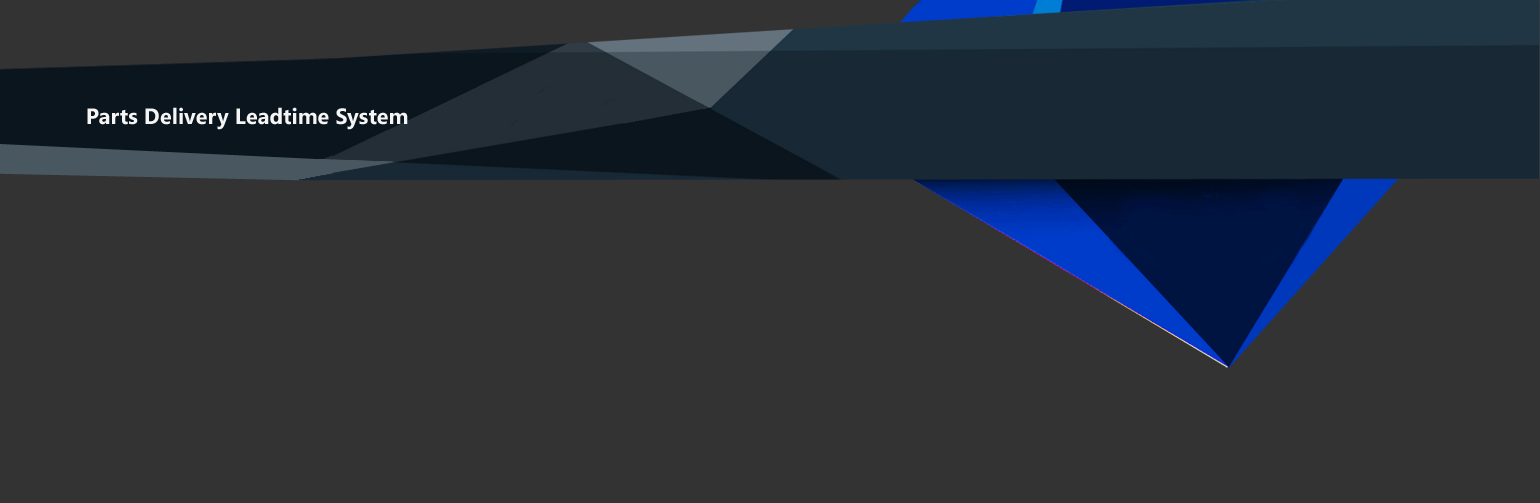
<style>
.page{position:relative;width:1540px;height:503px;background:#333333}
.page>*{position:absolute;margin:0}
.t1{font:21.9px "SegoeUI-Bold";color:#f5f5f5}
</style>
<div class="page">
<p class="t1" style="left:87px;top:107px;width:321px;height:23px">Parts Delivery Leadtime System</p>
</div>
